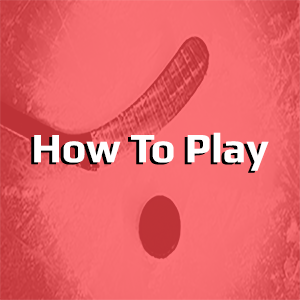
<style>
.page{position:relative;width:300px;height:300px}
.page>*{position:absolute;margin:0}
.t1{font:41.7px "Play-Bold";color:#ffffff}
</style>
<div class="page">
<p class="t1" style="left:34px;top:132px;width:235px;height:39px">How To Play</p>
</div>
